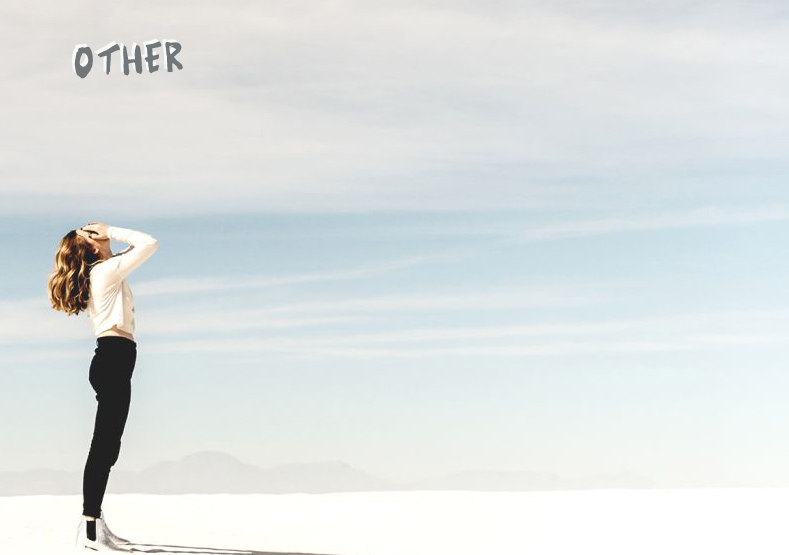
<style>
.page{position:relative;width:789px;height:555px}
.page>*{position:absolute;margin:0}
.t1{font:35.2px "Don'tForget";color:#717779}
</style>
<div class="page">
<p class="t1" style="left:74px;top:41px;width:109px;height:38px;rotate:-4deg">OTHER</p>
</div>
